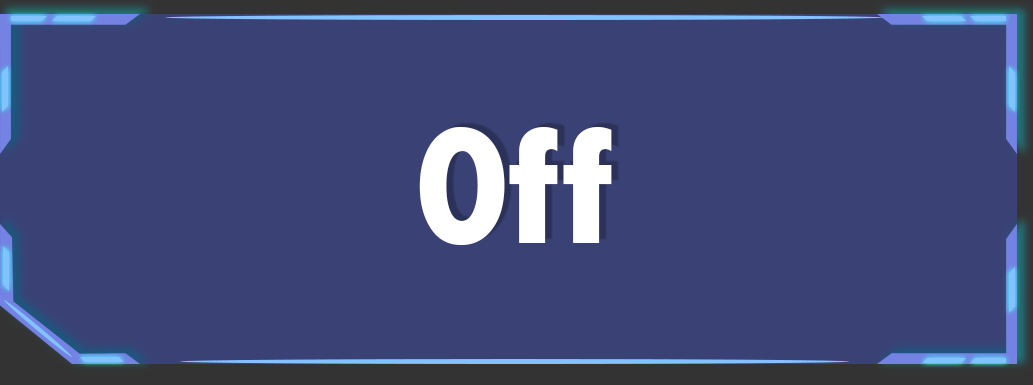
<style>
.page{position:relative;width:1033px;height:385px;background:#3a4275}
.page>*{position:absolute;margin:0}
.t1{font:167.3px "AbadiMT-CondensedExtraBold";color:#ffffff}
</style>
<div class="page">
<p class="t1" style="left:419px;top:127px;width:193px;height:118px">Off</p>
</div>
